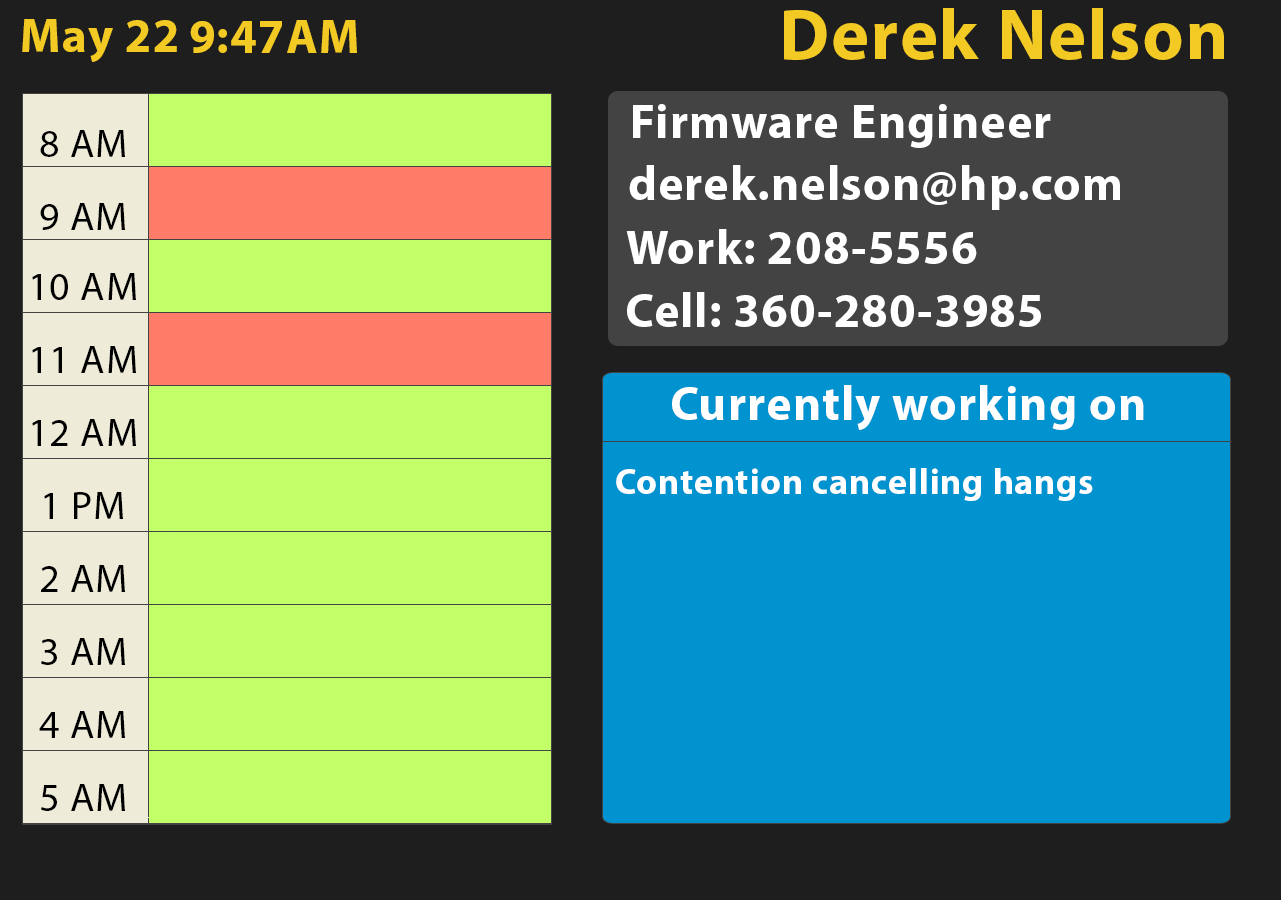
<style>
.page{position:relative;width:1281px;height:900px;background:#1e1e1e}
.page>*{position:absolute;margin:0}
.t1{font:72px "MyriadPro-Bold";letter-spacing:0.025em;color:#f3ca24}
.t2{font:48px "MyriadPro-Bold";letter-spacing:0.025em;color:#f3ca24}
.t3{font:48px "MyriadPro-Bold";letter-spacing:0.025em;color:#ffffff}
.t4{font:40px "MyriadPro-Regular";letter-spacing:0.025em;color:#000000}
.t5{font:36px "MyriadPro-Bold";letter-spacing:0.025em;color:#ffffff}
</style>
<div class="page">
<p class="t1" style="left:784px;top:8px;width:440px;height:52px">Derek Nelson</p>
<p class="t2" style="left:22px;top:19px;width:155px;height:43px">May 22</p>
<p class="t2" style="left:190px;top:20px;width:167px;height:33px">9:47AM</p>
<p class="t3" style="left:633px;top:104px;width:418px;height:44px">Firmware Engineer</p>
<p class="t4" style="left:40px;top:130px;width:85px;height:27px">8 AM</p>
<p class="t3" style="left:629px;top:165px;width:491px;height:45px">derek.nelson@hp.com</p>
<p class="t4" style="left:40px;top:203px;width:85px;height:27px">9 AM</p>
<p class="t3" style="left:626px;top:229px;width:351px;height:35px">Work: 208-5556</p>
<p class="t4" style="left:32px;top:273px;width:104px;height:27px">10 AM</p>
<p class="t3" style="left:627px;top:292px;width:414px;height:35px">Cell: 360-280-3985</p>
<p class="t4" style="left:32px;top:346px;width:104px;height:27px">11 AM</p>
<p class="t3" style="left:672px;top:385px;width:472px;height:45px">Currently working on</p>
<p class="t4" style="left:32px;top:419px;width:104px;height:27px">12 AM</p>
<p class="t5" style="left:616px;top:468px;width:477px;height:33px">Contention cancelling hangs</p>
<p class="t4" style="left:44px;top:492px;width:79px;height:27px">1 PM</p>
<p class="t4" style="left:41px;top:565px;width:84px;height:27px">2 AM</p>
<p class="t4" style="left:41px;top:638px;width:84px;height:27px">3 AM</p>
<p class="t4" style="left:39px;top:711px;width:86px;height:27px">4 AM</p>
<p class="t4" style="left:41px;top:784px;width:84px;height:27px">5 AM</p>
</div>
